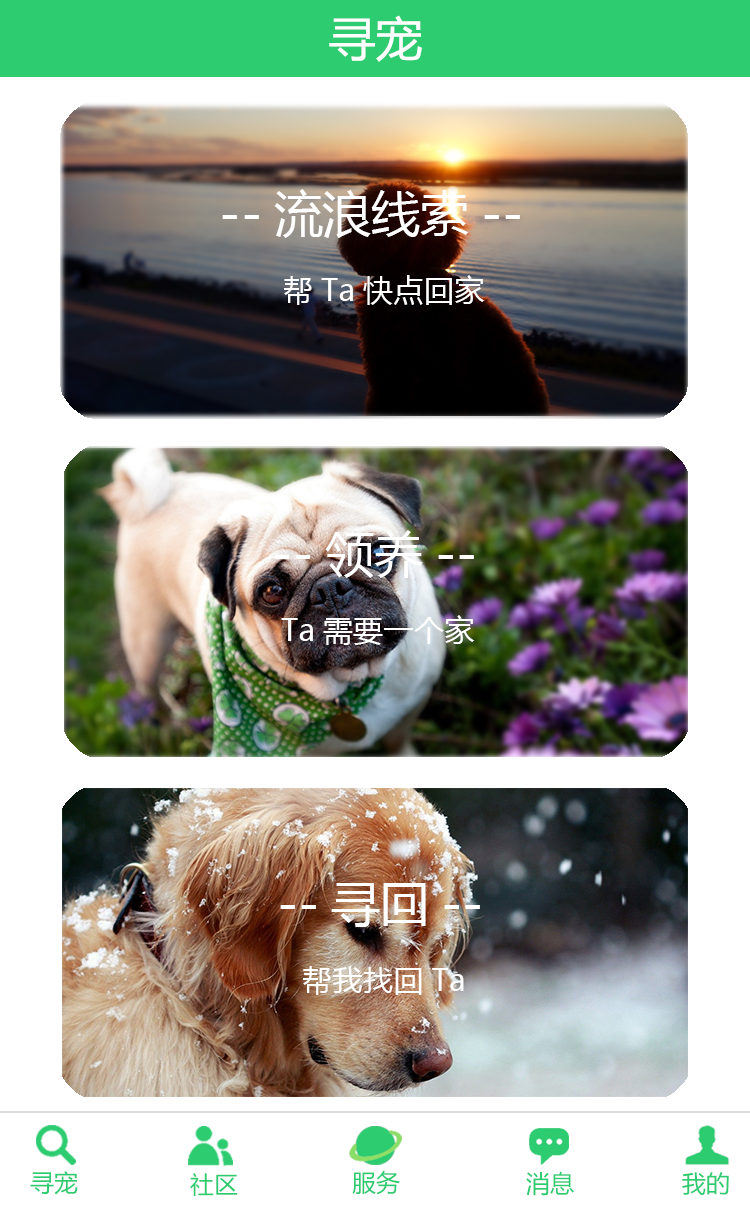
<style>
.page{position:relative;width:750px;height:1206px;background:#ffffff}
.page>*{position:absolute;margin:0}
.t1{font:47px "MicrosoftYaHei";color:#ffffff}
.t2{font:48.7px "MicrosoftYaHei";color:#ffffff}
.t3{font:30.4px "MicrosoftYaHei";color:#ffffff}
.t4{font:24px "MicrosoftYaHei";color:#2ecc71}
.t5{font:24px "MicrosoftYaHei"}
</style>
<div class="page">
<p class="t1" style="left:329px;top:15px;width:93px;height:47px">寻宠</p>
<p class="t2" style="left:222px;top:189px;width:298px;height:116px">--流浪线索--<br><span class="t3">帮Ta快点回家</span></p>
<p class="t3" style="left:274px;top:530px;width:201px;height:115px"><span class="t2">    --领养--<br></span>Ta需要一个家</p>
<p class="t2" style="left:280px;top:883px;width:200px;height:112px">--寻回--<br><span class="t3">帮我找回Ta</span></p>
<p class="t4" style="left:30px;top:1171px;width:48px;height:24px">寻宠</p>
<p class="t4" style="left:190px;top:1173px;width:47px;height:23px">社区</p>
<p class="t5" style="left:352px;top:1171px;width:48px;height:25px">服务</p>
<p class="t4" style="left:352px;top:1170px;width:48px;height:25px">服务</p>
<p class="t5" style="left:525px;top:1171px;width:48px;height:25px">消息</p>
<p class="t4" style="left:526px;top:1171px;width:48px;height:25px">消息</p>
<p class="t4" style="left:682px;top:1172px;width:47px;height:23px">我的</p>
<p class="t4" style="left:682px;top:1172px;width:47px;height:23px">我的</p>
</div>
